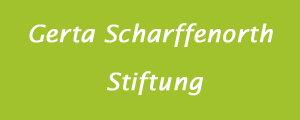
<style>
.page{position:relative;width:300px;height:120px;background:#a1c22d}
.page>*{position:absolute;margin:0}
.t1{font:24px/48px "LucidaSans-Italic";color:#ffffff;font-weight:bold}
</style>
<div class="page">
<p class="t1" style="left:29px;top:23px;width:244px;height:73px;text-align:center">Gerta Scharffenorth <br>Stiftung</p>
</div>
